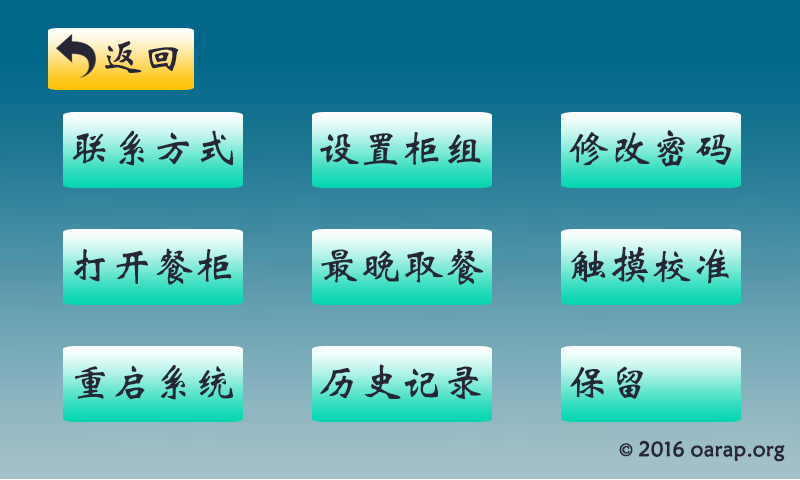
<style>
.page{position:relative;width:800px;height:480px}
.page>*{position:absolute;margin:0}
.t1{font:41.7px "STXinwei";color:#272636}
.t2{font:20.8px "STXinwei";color:#272636;font-weight:bold}
.t3{font:20.8px "AdobeSongStd-Light";color:#272636;font-weight:bold}
</style>
<div class="page">
<p class="t1" style="left:105px;top:41px;width:74px;height:32px">返回</p>
<p class="t1" style="left:72px;top:130px;width:161px;height:36px">联系方式</p>
<p class="t1" style="left:320px;top:132px;width:161px;height:34px">设置柜组</p>
<p class="t1" style="left:569px;top:130px;width:163px;height:37px">修改密码</p>
<p class="t1" style="left:571px;top:246px;width:158px;height:38px">触摸校准</p>
<p class="t1" style="left:74px;top:248px;width:158px;height:37px">打开餐柜</p>
<p class="t1" style="left:321px;top:248px;width:163px;height:37px">最晚取餐</p>
<p class="t1" style="left:74px;top:364px;width:159px;height:36px">重启系统</p>
<p class="t1" style="left:320px;top:364px;width:161px;height:36px">历史记录</p>
<p class="t1" style="left:570px;top:366px;width:74px;height:33px">保留</p>
<p class="t2" style="left:619px;top:440px;width:166px;height:22px"><span class="t3">© </span>2016 oarap.org</p>
</div>
